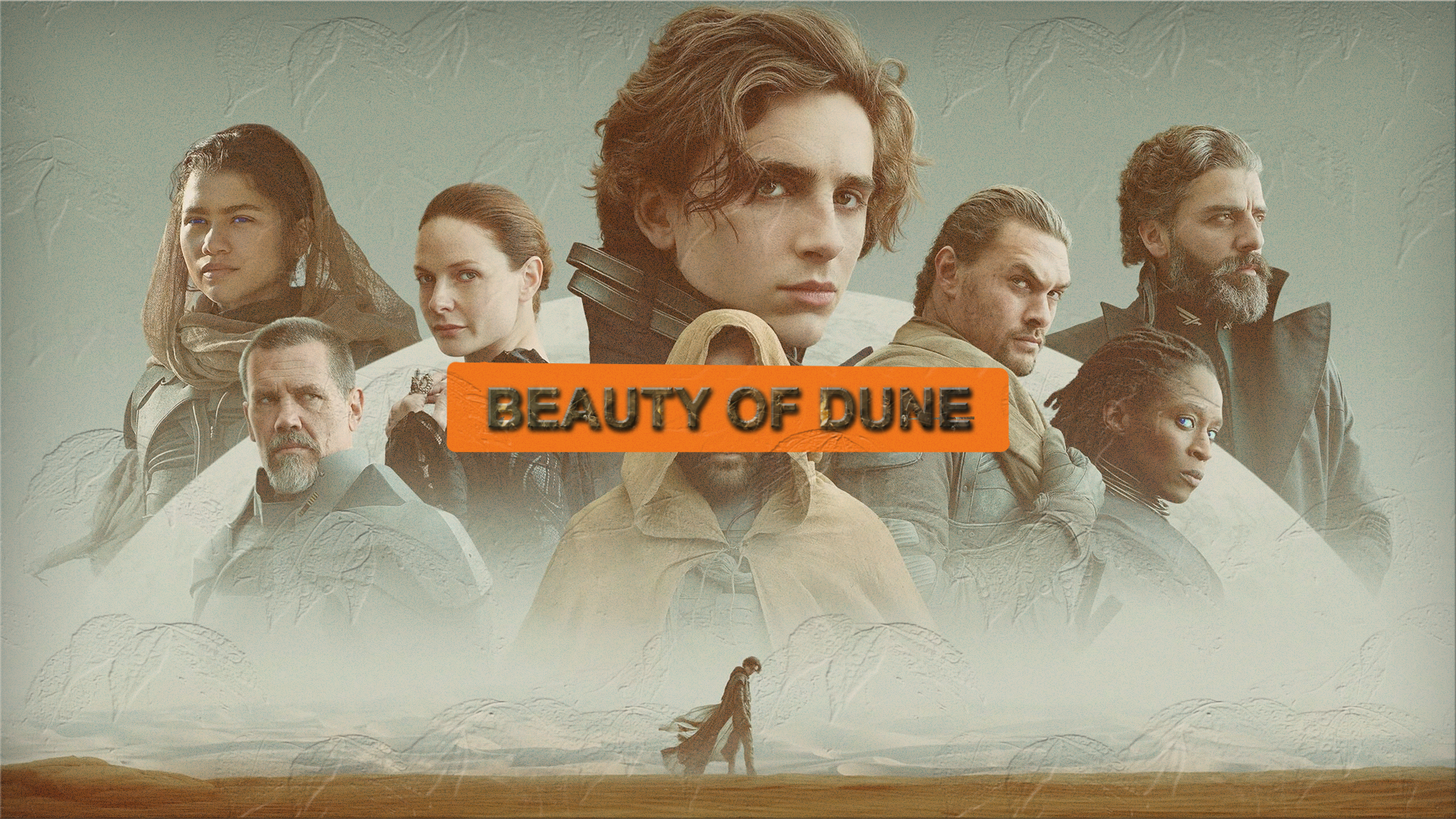
<style>
.page{position:relative;width:1456px;height:819px}
.page>*{position:absolute;margin:0}
.t1{font:54.6px "Arial-BoldMT";letter-spacing:0.005em}
</style>
<div class="page">
<p class="t1" style="left:488px;top:387px;width:482px;height:41px">BEAUTY OF DUNE</p>
</div>
